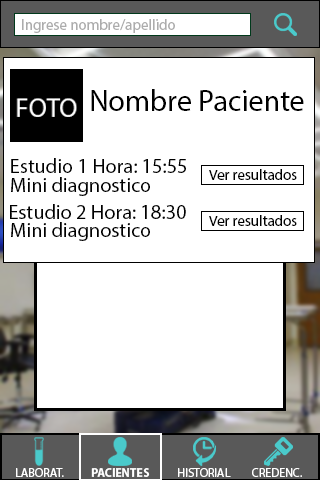
<style>
.page{position:relative;width:320px;height:480px;background:#ffffff}
.page>*{position:absolute;margin:0}
.t1{font:15px "MyriadPro-Regular";color:#acacac}
.t2{font:30px "MyriadPro-Regular";color:#000000}
.t3{font:20.2px "MyriadPro-Regular";color:#000000}
.t4{font:14.8px "MyriadPro-Regular";color:#000000}
.t5{font:12px "MyriadPro-Regular";color:#ffffff}
.t6{font:12px "MyriadPro-Bold";color:#ffffff}
.t7{font:12px "MyriadPro-Regular";color:#fefefe}
</style>
<div class="page">
<p class="t1" style="left:22px;top:19px;width:153px;height:14px">Ingrese nombre/apellido</p>
<p class="t2" style="left:91px;top:89px;width:213px;height:22px">Nombre Paciente</p>
<p class="t3" style="left:11px;top:158px;width:175px;height:15px">Estudio 1 Hora: 15:55</p>
<p class="t4" style="left:209px;top:169px;width:88px;height:11px">Ver resultados</p>
<p class="t3" style="left:11px;top:177px;width:139px;height:19px">Mini diagnostico</p>
<p class="t3" style="left:10px;top:204px;width:176px;height:15px">Estudio 2 Hora: 18:30</p>
<p class="t3" style="left:11px;top:222px;width:139px;height:19px">Mini diagnostico</p>
<p class="t4" style="left:209px;top:215px;width:88px;height:11px">Ver resultados</p>
<p class="t5" style="left:16px;top:468px;width:48px;height:9px">LABORAT.</p>
<p class="t6" style="left:91px;top:468px;width:59px;height:9px">PACIENTES</p>
<p class="t7" style="left:178px;top:468px;width:53px;height:9px">HISTORIAL</p>
<p class="t5" style="left:252px;top:468px;width:50px;height:9px">CREDENC.</p>
</div>
